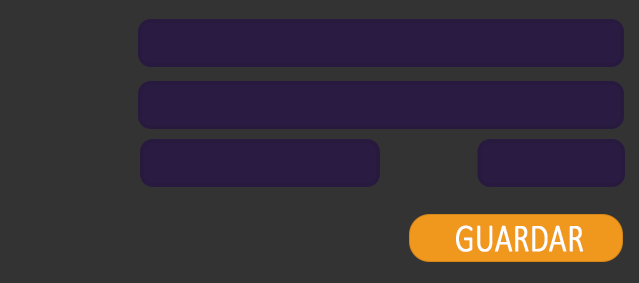
<style>
.page{position:relative;width:639px;height:283px;background:#333333}
.page>*{position:absolute;margin:0}
.t1{font:39.9px "Calibri-Light";color:#ffffff;font-weight:bold;scale:0.77 1}
</style>
<div class="page">
<p class="t1" style="left:456px;top:225px;width:127px;height:27px">GUARDAR</p>
</div>
